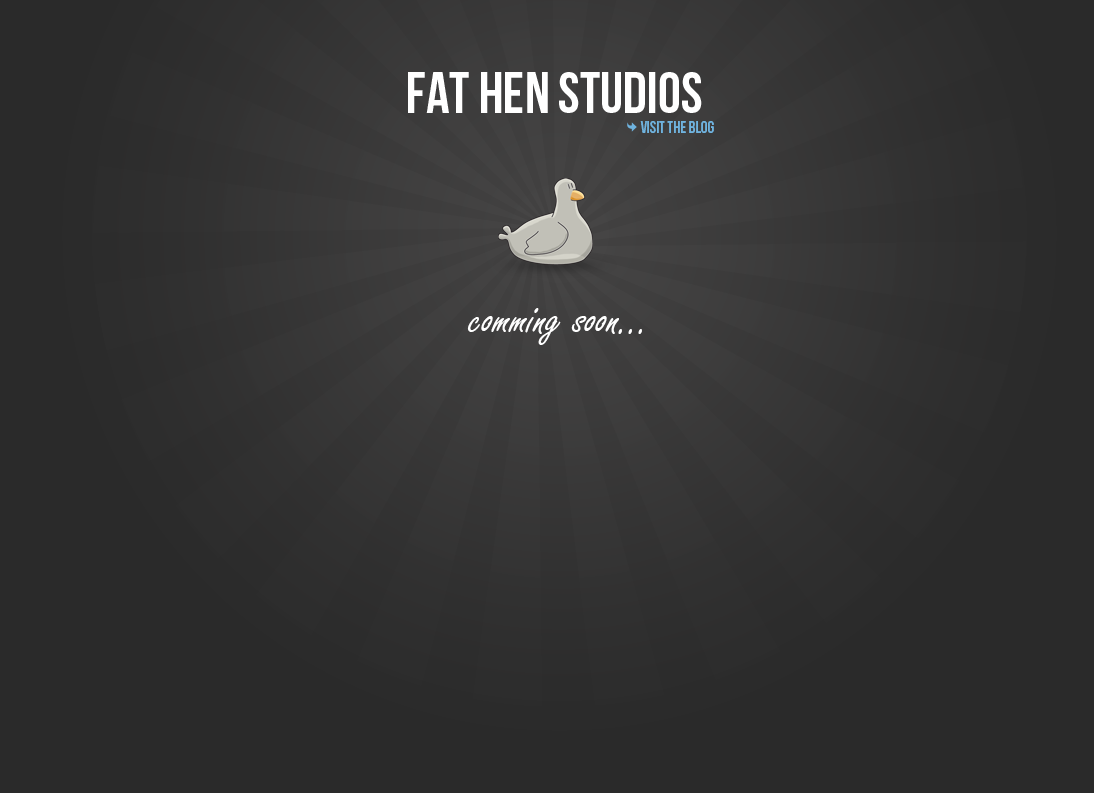
<style>
.page{position:relative;width:1094px;height:793px;background:#2a2a2a}
.page>*{position:absolute;margin:0}
.t1{font:57.7px "BebasNeue";color:#ffffff}
.t2{font:16.4px "BebasNeue";color:#6fb3df}
.t3{font:48px "FreestyleScript-Regular";color:#ffffff}
</style>
<div class="page">
<p class="t1" style="left:408px;top:72px;width:294px;height:41px">FAT HEN STUDIOS</p>
<p class="t2" style="left:640px;top:121px;width:74px;height:12px">VISIT THE BLOG</p>
<p class="t3" style="left:467px;top:308px;width:175px;height:37px">comming soon...</p>
</div>
